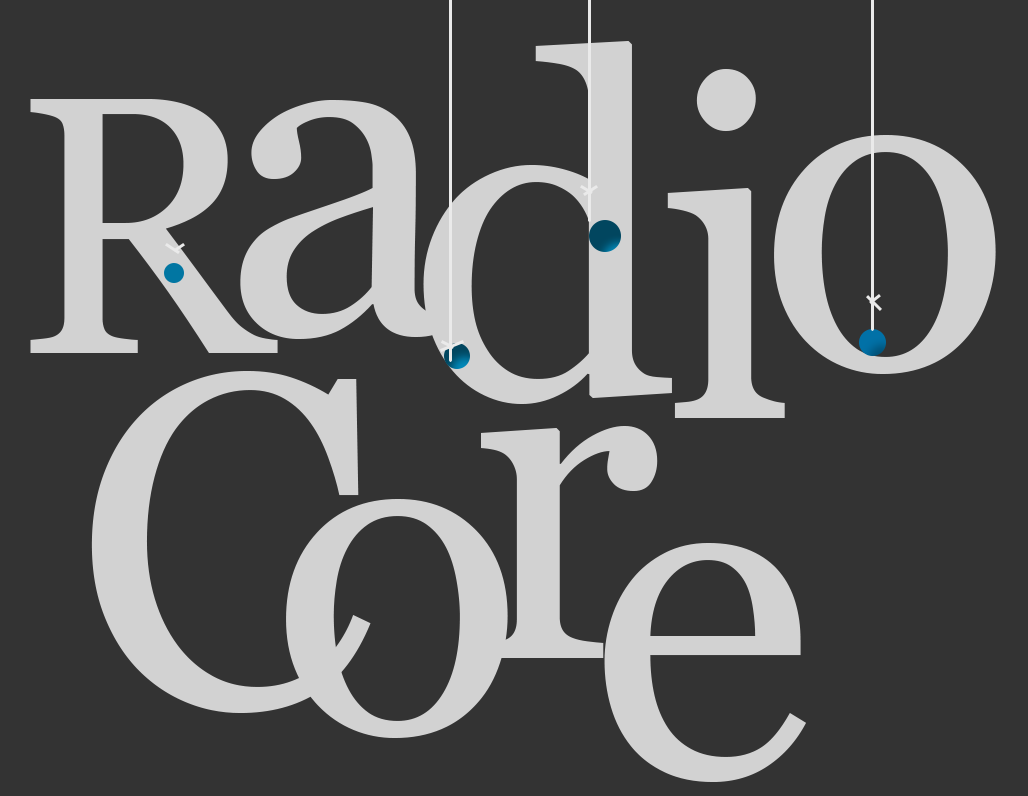
<style>
.page{position:relative;width:1028px;height:796px;background:#333333}
.page>*{position:absolute;margin:0}
.t1{font:470.6px "Georgia";letter-spacing:-0.005em;color:#d2d2d2}
.t2{font:366.2px "Georgia";letter-spacing:-0.005em;color:#d2d2d2}
</style>
<div class="page">
<p class="t1" style="left:423px;top:41px;width:249px;height:363px">d</p>
<p class="t1" style="left:667px;top:69px;width:118px;height:349px">i</p>
<p class="t2" style="left:30px;top:99px;width:248px;height:254px">R</p>
<p class="t1" style="left:240px;top:100px;width:214px;height:239px">a</p>
<p class="t1" style="left:774px;top:135px;width:222px;height:239px">o</p>
<p class="t1" style="left:91px;top:371px;width:280px;height:342px">C</p>
<p class="t1" style="left:481px;top:426px;width:177px;height:232px">r</p>
<p class="t1" style="left:286px;top:499px;width:222px;height:239px">o</p>
<p class="t1" style="left:604px;top:543px;width:202px;height:239px">e</p>
</div>
